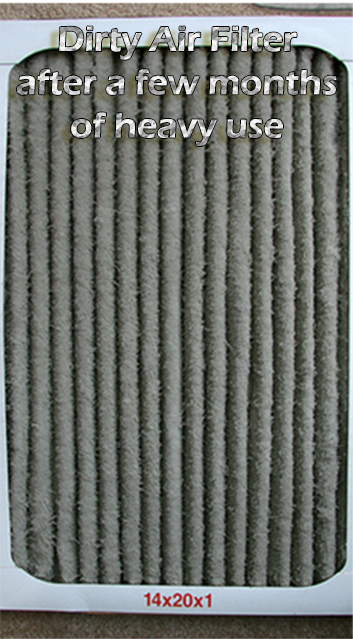
<style>
.page{position:relative;width:353px;height:639px}
.page>*{position:absolute;margin:0}
.t1{font:36px "ErasITC-Demi"}
</style>
<div class="page">
<p class="t1" style="left:17px;top:26px;width:320px;height:120px;text-align:center">Dirty Air Filter<br>after a few months<br>of heavy use</p>
</div>
